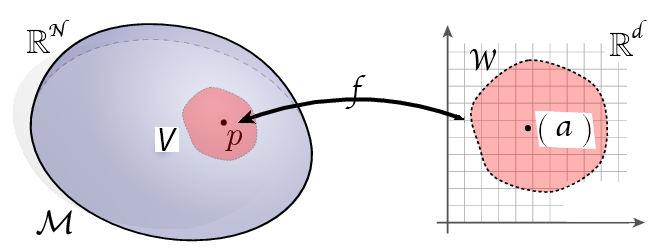
<style>
.page{position:relative;width:650px;height:250px;background:#ffffff}
.page>*{position:absolute;margin:0}
.t1{font:18px "Apple-Chancery";color:#000000}
.t2{font:21px "Apple-Chancery";color:#000000}
.t3{font:30px "Apple-Chancery";color:#000000}
.t4{font:27px "Apple-Chancery";color:#000000}
.t5{font:33px "Apple-Chancery";color:#000000}
.t6{font:33px "MyriadPro-It";color:#000000}
</style>
<div class="page">
<p class="t1" style="left:49px;top:20px;width:21px;height:17px">N</p>
<p class="t2" style="left:632px;top:20px;width:15px;height:18px">d</p>
<p class="t3" style="left:470px;top:49px;width:27px;height:22px">W</p>
<p class="t4" style="left:345px;top:75px;width:21px;height:34px">f</p>
<p class="t5" style="left:556px;top:121px;width:17px;height:15px">a</p>
<p class="t6" style="left:159px;top:128px;width:18px;height:23px">V</p>
</div>
